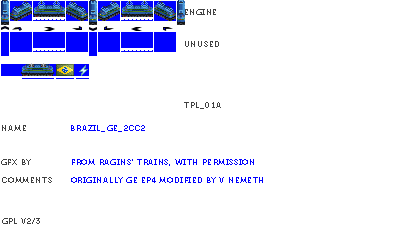
<style>
.page{position:relative;width:400px;height:230px;background:#ffffff}
.page>*{position:absolute;margin:0}
.t1{font:8px "Museo700-Regular";letter-spacing:0.075em;color:#404040;text-transform:uppercase}
.t2{font:8px "Museo700-Regular";letter-spacing:0.075em;color:#0000ff;text-transform:uppercase}
</style>
<div class="page">
<p class="t1" style="left:185px;top:9px;width:31px;height:6px">engine</p>
<p class="t1" style="left:185px;top:41px;width:34px;height:6px">unused</p>
<p class="t1" style="left:184px;top:102px;width:37px;height:7px">tpl_01a</p>
<p class="t1" style="left:2px;top:125px;width:24px;height:6px">name</p>
<p class="t2" style="left:71px;top:125px;width:74px;height:7px">Brazil_GE_2CC2</p>
<p class="t1" style="left:1px;top:159px;width:30px;height:6px">gfx by</p>
<p class="t2" style="left:72px;top:159px;width:182px;height:7px">from ragins' trains, with permission</p>
<p class="t1" style="left:2px;top:177px;width:50px;height:6px">comments</p>
<p class="t2" style="left:71px;top:177px;width:192px;height:6px">originally ge ep4 modified by v nemeth</p>
<p class="t1" style="left:2px;top:218px;width:38px;height:6px">gpl v2/3</p>
</div>
